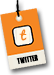
<style>
.page{position:relative;width:54px;height:75px;background:#ffffff}
.page>*{position:absolute;margin:0}
.t1{font:12.5px "Pacifico";letter-spacing:0.025em;color:#f58723}
.t2{font:8.3px "GodzillaMovieFont";letter-spacing:0.025em;color:#000000}
</style>
<div class="page">
<p class="t1" style="left:19px;top:29px;width:8px;height:12px">t</p>
<p class="t2" style="left:16px;top:54px;width:23px;height:11px;rotate:-10deg">TWITTER</p>
</div>
